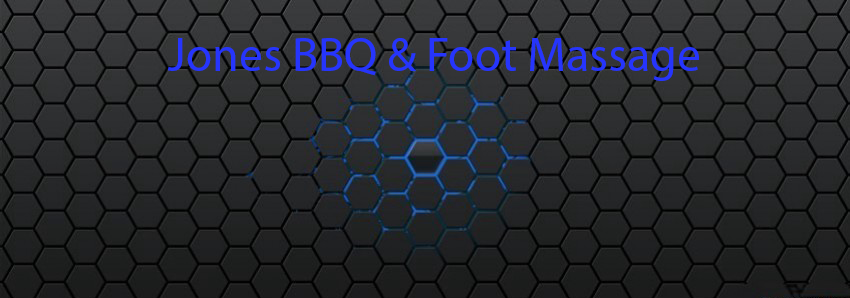
<style>
.page{position:relative;width:850px;height:298px}
.page>*{position:absolute;margin:0}
.t1{font:48px "MyriadPro-Regular";color:#2635fd}
</style>
<div class="page">
<p class="t1" style="left:168px;top:38px;width:531px;height:43px">Jones BBQ &amp; Foot Massage</p>
</div>
